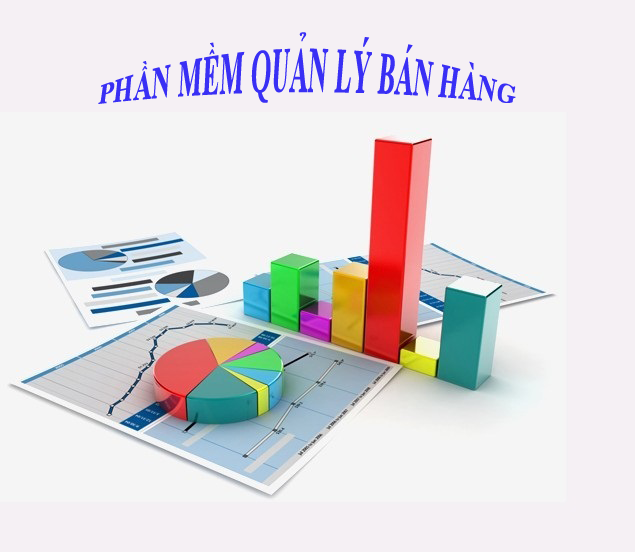
<style>
.page{position:relative;width:635px;height:552px;background:#f5f0f4}
.page>*{position:absolute;margin:0}
.t1{font:25px "TimesNewRomanPS-BoldMT";letter-spacing:0.025em;color:#433eff;text-transform:uppercase;font-style:italic}
</style>
<div class="page">
<p class="t1" style="left:98px;top:32px;width:418px;height:72px;text-align:center">PHẦN MỀM QUẢN LÝ BÁN HÀNG</p>
</div>
